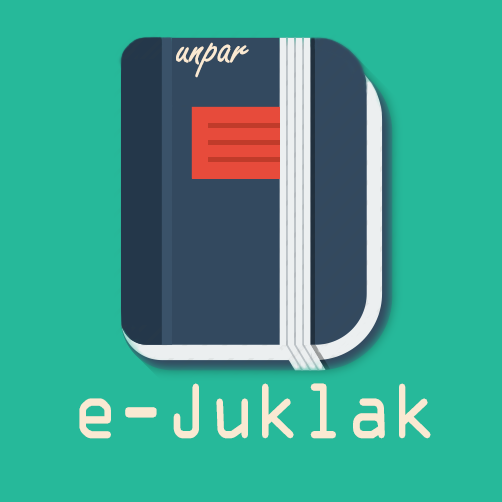
<style>
.page{position:relative;width:502px;height:502px;background:#26b99a}
.page>*{position:absolute;margin:0}
.t1{font:53.5px "FreestyleScript-Regular";color:#fae9d2}
.t2{font:83.9px "OCRAExtended";color:#fae9d2;scale:0.9 1}
</style>
<div class="page">
<p class="t1" style="left:176px;top:42px;width:73px;height:36px">unpar</p>
<p class="t2" style="left:79px;top:383px;width:352px;height:56px">e-Juklak</p>
</div>
